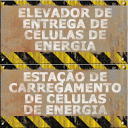
<style>
.page{position:relative;width:128px;height:128px}
.page>*{position:absolute;margin:0}
.t1{font:12px/11px "Tahoma-Bold";letter-spacing:0.01em;color:#e2dad2;text-transform:uppercase;font-weight:bold;scale:1.05 1}
.t2{font:12px/11px "Tahoma-Bold";letter-spacing:0.01em;color:#e5ded7;text-transform:uppercase;font-weight:bold;scale:1.05 1}
</style>
<div class="page">
<p class="t1" style="left:18px;top:8px;width:94px;height:43px;text-align:center">elevador de<br>entrega DE<br>células de<br>energia</p>
<p class="t2" style="left:9px;top:69px;width:112px;height:46px;text-align:center">estação de<br>carregamento<br>DE células<br>de energia</p>
</div>
